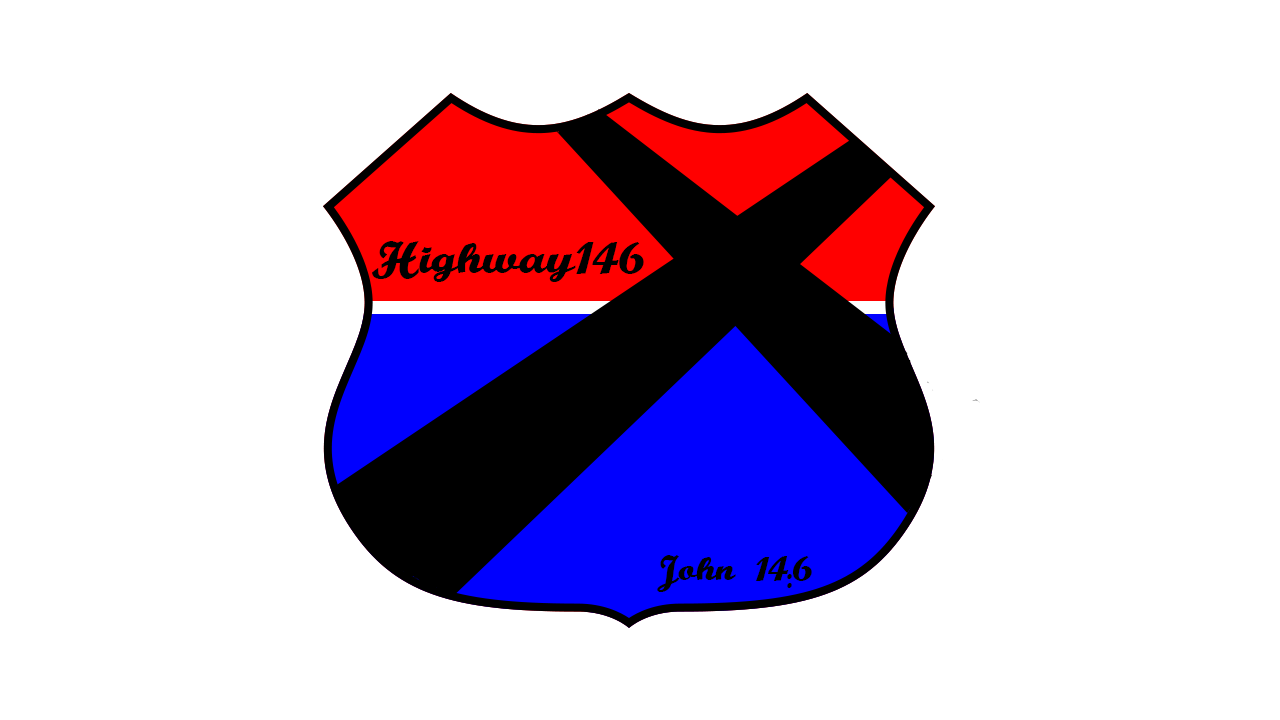
<style>
.page{position:relative;width:1280px;height:720px;background:#ffffff}
.page>*{position:absolute;margin:0}
.t1{font:54.2px "BuffaloNickel";color:#000000}
.t2{font:41.7px "BuffaloNickel";color:#000000}
</style>
<div class="page">
<p class="t1" style="left:372px;top:241px;width:272px;height:41px">Highway146</p>
<p class="t2" style="left:657px;top:555px;width:155px;height:37px">John 14:6</p>
</div>
